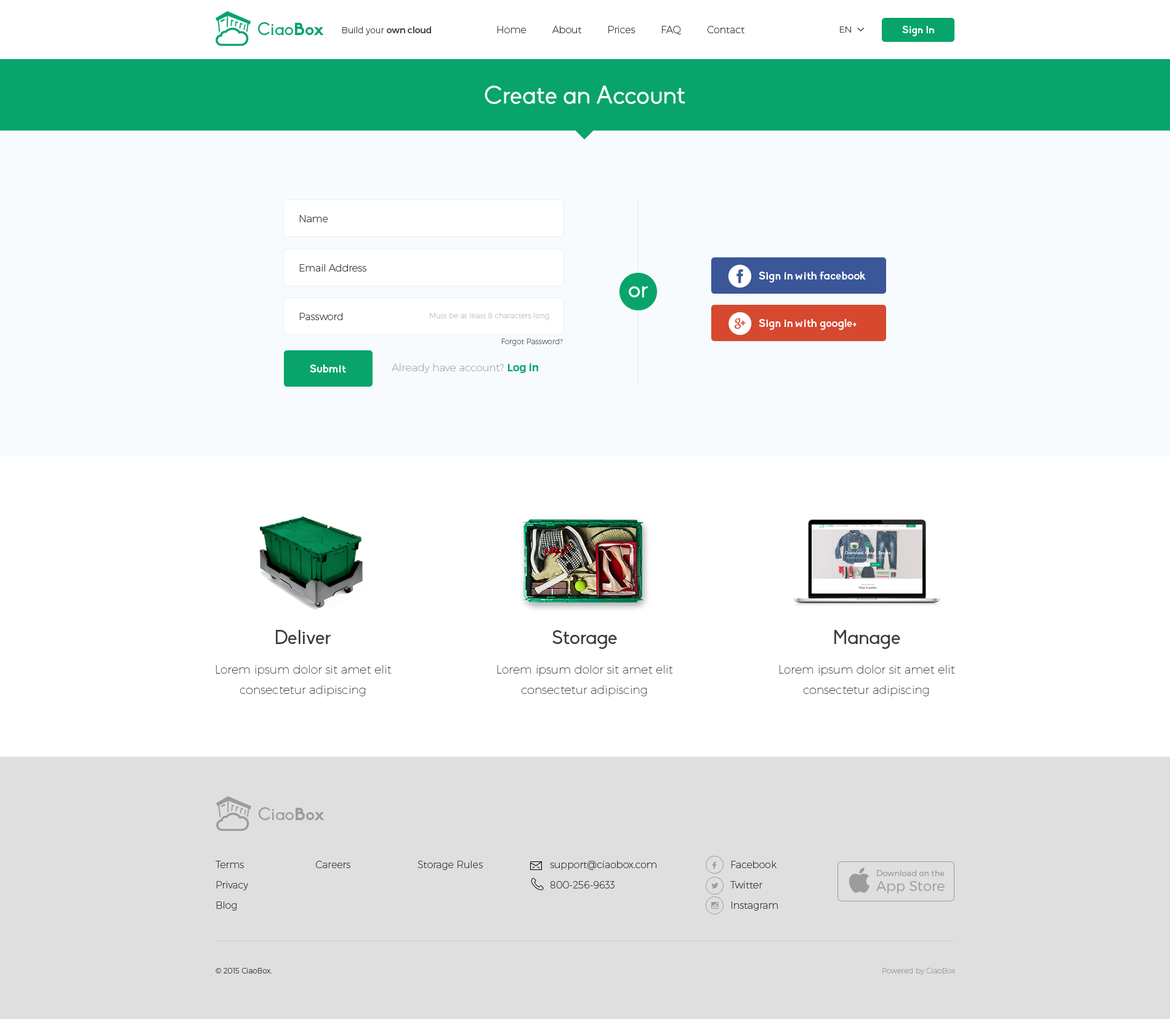
<style>
.page{position:relative;width:1170px;height:1019px;background:#ffffff}
.page>*{position:absolute;margin:0}
.t1{font:17.2px "Biko";color:#08a46c}
.t2{font:17.2px "Biko-Bold";color:#08a46c}
.t3{font:8.6px "Montserrat-UltraLight";color:#3d3d3d}
.t4{font:8.6px "Montserrat-Regular";color:#3d3d3d}
.t5{font:9.9px "Montserrat-UltraLight";color:#3d3d3d}
.t6{font:10.5px "Biko-Bold";color:#ffffff}
.t7{font:24.6px "Biko";color:#f8fbfd}
.t8{font:11.1px "Biko-Bold";color:#ffffff}
.t9{font:23.4px "Biko";color:#f8fbfd}
.t10{font:7.4px "Montserrat-UltraLight";color:#c4c4c4}
.t11{font:7.4px "Montserrat-UltraLight";color:#646464}
.t12{font:10.5px "Montserrat-UltraLight";color:#acacac}
.t13{font:10.5px "Montserrat-SemiBold";color:#08a46c}
.t14{font:19.1px "Biko";color:#3d3d3d}
.t15{font:11.7px/20.3px "Montserrat-Hairline";color:#3d3d3d}
.t16{font:17.2px "Biko";color:#9c9c9c}
.t17{font:17.2px "Biko-Bold";color:#9c9c9c}
.t18{font:9.9px/20.3px "Montserrat-UltraLight";color:#3d3d3d}
.t19{font:11.7px "Socialico";color:#9c9c9c;text-transform:uppercase}
.t20{font:8px/20.3px "Montserrat-Light";color:#9c9c9c}
.t21{font:14px/14.8px "Montserrat-Light";color:#9c9c9c}
.t22{font:7.4px "font2985";color:#9c9c9c}
.t23{font:7.4px "Montserrat-UltraLight";color:#3d3d3d}
.t24{font:7.4px "Montserrat-UltraLight";color:#9c9c9c}
</style>
<div class="page">
<p class="t1" style="left:258px;top:22px;width:66px;height:13px">Ciao<span class="t2">Box</span></p>
<p class="t3" style="left:342px;top:26px;width:89px;height:9px">Build your <span class="t4">own cloud</span></p>
<p class="t5" style="left:497px;top:26px;width:248px;height:8px">Home         About         Prices         FAQ         Contact</p>
<p class="t3" style="left:840px;top:26px;width:11px;height:7px">EN</p>
<p class="t6" style="left:902px;top:25px;width:32px;height:11px">Sign In</p>
<p class="t7" style="left:485px;top:86px;width:200px;height:18px">Create an Account</p>
<p class="t5" style="left:299px;top:215px;width:29px;height:7px">Name</p>
<p class="t5" style="left:299px;top:264px;width:67px;height:8px">Email Address</p>
<p class="t8" style="left:759px;top:272px;width:107px;height:11px">Sign in with facebook</p>
<p class="t9" style="left:629px;top:286px;width:19px;height:11px">or</p>
<p class="t5" style="left:299px;top:313px;width:44px;height:7px">Password</p>
<p class="t10" style="left:430px;top:313px;width:119px;height:7px">Must be at least 8 characters long</p>
<p class="t8" style="left:759px;top:319px;width:98px;height:11px">Sign in with google+</p>
<p class="t11" style="left:501px;top:339px;width:62px;height:7px">Forgot Password?</p>
<p class="t8" style="left:310px;top:365px;width:36px;height:8px">Submit</p>
<p class="t12" style="left:392px;top:363px;width:146px;height:10px">Already have account? <span class="t13">Log in</span></p>
<p class="t14" style="left:276px;top:630px;width:55px;height:14px">Deliver</p>
<p class="t14" style="left:552px;top:630px;width:65px;height:19px">Storage</p>
<p class="t14" style="left:834px;top:630px;width:66px;height:19px">Manage</p>
<p class="t15" style="left:216px;top:665px;width:175px;height:31px;text-align:center">Lorem ipsum dolor sit amet elit<br>consectetur adipiscing</p>
<p class="t15" style="left:497px;top:665px;width:175px;height:31px;text-align:center">Lorem ipsum dolor sit amet elit<br>consectetur adipiscing</p>
<p class="t15" style="left:779px;top:665px;width:175px;height:31px;text-align:center">Lorem ipsum dolor sit amet elit<br>consectetur adipiscing</p>
<p class="t16" style="left:259px;top:807px;width:66px;height:13px">Ciao<span class="t17">Box</span></p>
<p class="t18" style="left:216px;top:861px;width:32px;height:50px">Terms<br>Privacy<br>Blog</p>
<p class="t5" style="left:315px;top:861px;width:35px;height:7px">Careers</p>
<p class="t5" style="left:418px;top:861px;width:65px;height:9px">Storage Rules</p>
<p class="t18" style="left:550px;top:861px;width:106px;height:28px">support@ciaobox.com<br>800-256-9633</p>
<p class="t19" style="left:712px;top:862px;width:4px;height:7px">F</p>
<p class="t18" style="left:730px;top:861px;width:48px;height:50px">Facebook<br>Twitter<br>Instagram</p>
<p class="t20" style="left:876px;top:870px;width:69px;height:24px">Download on the<br><span class="t21">App Store</span></p>
<p class="t19" style="left:711px;top:883px;width:8px;height:6px">L</p>
<p class="t22" style="left:711px;top:902px;width:8px;height:7px">x</p>
<p class="t23" style="left:216px;top:968px;width:56px;height:6px">© 2015 CiaoBox.</p>
<p class="t24" style="left:882px;top:968px;width:73px;height:7px">Powered by CiaoBox</p>
</div>
